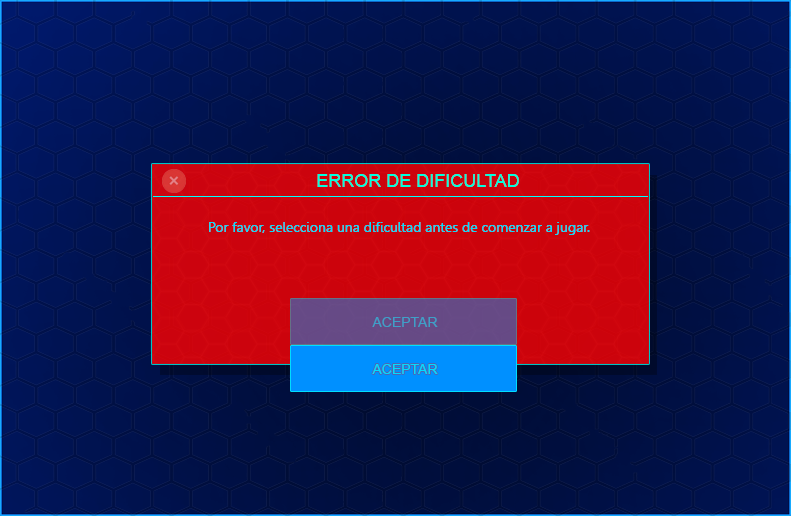
<style>
.page{position:relative;width:791px;height:516px}
.page>*{position:absolute;margin:0}
.t1{font:18px "ArialMT";color:#00ffde}
.t2{font:14px "Leelawadee";color:#00deff}
.t3{font:14px "ArialMT";color:#3e9fc8}
.t4{font:14px "ArialMT";color:#00deff}
</style>
<div class="page">
<p class="t1" style="left:317px;top:174px;width:202px;height:13px">ERROR DE DIFICULTAD</p>
<p class="t2" style="left:209px;top:222px;width:381px;height:13px">Por favor, selecciona una dificultad antes de comenzar a jugar.</p>
<p class="t3" style="left:372px;top:317px;width:66px;height:10px">ACEPTAR</p>
<p class="t4" style="left:372px;top:364px;width:66px;height:10px">ACEPTAR</p>
</div>
